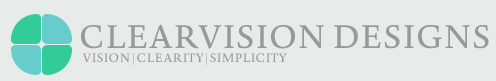
<style>
.page{position:relative;width:496px;height:81px;background:#e7ecea}
.page>*{position:absolute;margin:0}
.t1{font:32px "NovelPro-Regular";color:#999999}
.t2{font:12px "NovelPro-Regular";color:#999999}
</style>
<div class="page">
<p class="t1" style="left:81px;top:24px;width:408px;height:25px">CLEARVISION DESIGNS</p>
<p class="t2" style="left:82px;top:52px;width:205px;height:13px">VISION | CLEARITY | SIMPLICITY</p>
</div>
